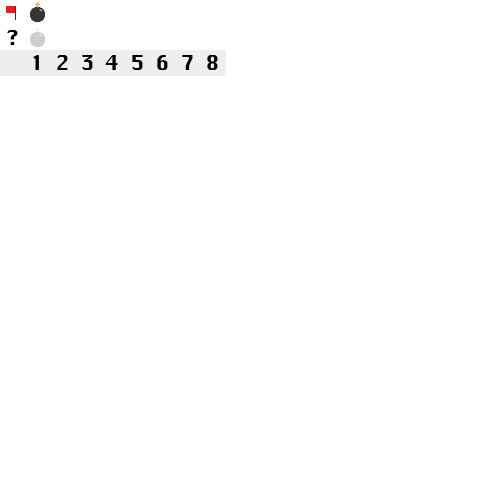
<style>
.page{position:relative;width:500px;height:500px;background:#ffffff}
.page>*{position:absolute;margin:0}
.t1{font:20px "Krungthep";color:#000000}
</style>
<div class="page">
<p class="t1" style="left:7px;top:30px;width:11px;height:15px">?</p>
<p class="t1" style="left:33px;top:55px;width:6px;height:15px">1</p>
<p class="t1" style="left:57px;top:55px;width:11px;height:15px">2</p>
<p class="t1" style="left:82px;top:55px;width:11px;height:15px">3</p>
<p class="t1" style="left:105px;top:55px;width:13px;height:15px">4</p>
<p class="t1" style="left:132px;top:55px;width:11px;height:15px">5</p>
<p class="t1" style="left:157px;top:55px;width:11px;height:15px">6</p>
<p class="t1" style="left:182px;top:55px;width:11px;height:15px">7</p>
<p class="t1" style="left:207px;top:55px;width:11px;height:15px">8</p>
</div>
